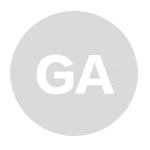
<style>
.page{position:relative;width:150px;height:150px;background:#ffffff}
.page>*{position:absolute;margin:0}
.t1{font:44.9px "FZLTTHB--B51-0";color:#ffffff}
</style>
<div class="page">
<p class="t1" style="left:36px;top:54px;width:79px;height:41px">GA</p>
</div>
